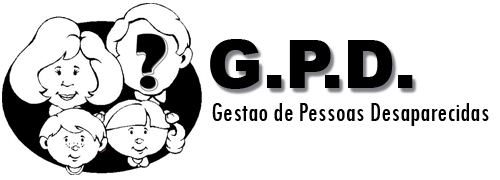
<style>
.page{position:relative;width:500px;height:180px;background:#ffffff}
.page>*{position:absolute;margin:0}
.t1{font:66.7px "Arial-Black";color:#000000}
.t2{font:27.8px "TwCenMT-Condensed";color:#000000}
</style>
<div class="page">
<p class="t1" style="left:210px;top:39px;width:203px;height:50px">G.P.D.</p>
<p class="t2" style="left:212px;top:103px;width:277px;height:23px">Gestao de Pessoas Desaparecidas</p>
</div>
